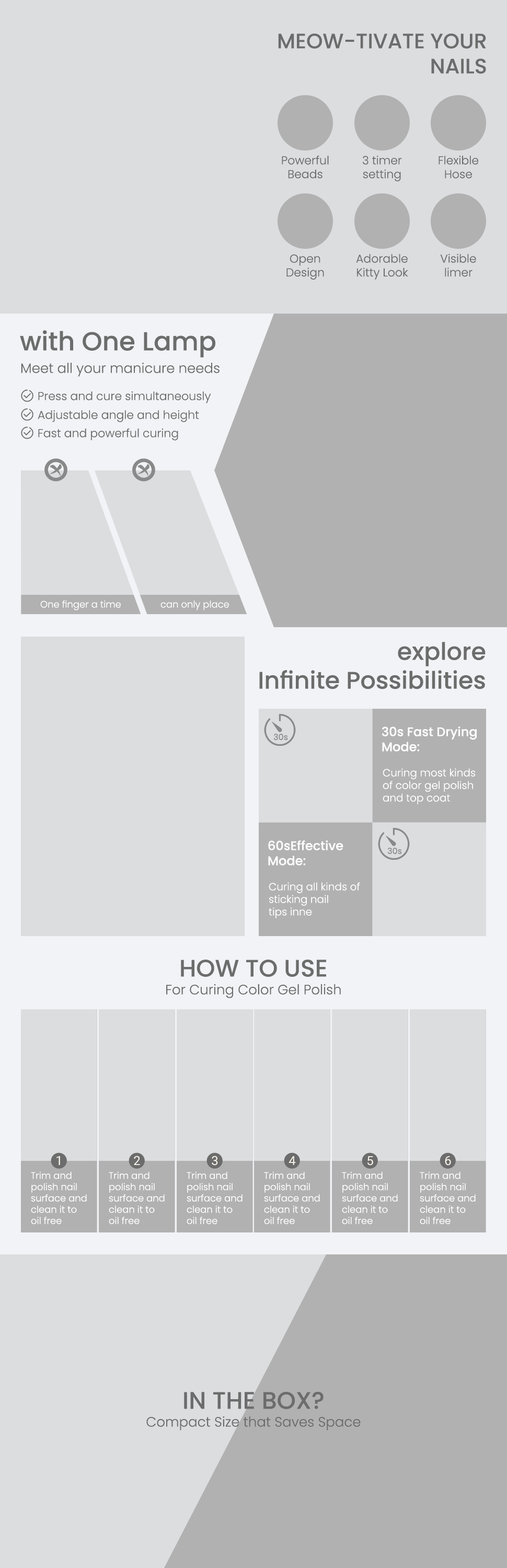
<style>
.page{position:relative;width:507px;height:1568px;background:#dcdddf}
.page>*{position:absolute;margin:0}
.t1{font:20.9px "Poppins-Medium";color:#6c6c6c;text-transform:uppercase}
.t2{font:11.5px "Poppins-Light";color:#6c6c6c}
.t3{font:26.1px "Poppins-Medium";color:#6c6c6c}
.t4{font:13.6px "Poppins-Light";color:#6c6c6c}
.t5{font:9.4px "Poppins-Light";color:#ffffff}
.t6{font:24px "Poppins-Medium";color:#6c6c6c}
.t7{font:8.4px "Poppins-Regular";color:#898989}
.t8{font:12.5px "Poppins-Medium";color:#ffffff}
.t9{font:10.5px "Poppins-Light";color:#ffffff}
.t10{font:24px "Poppins-Medium";color:#6c6c6c;text-transform:uppercase}
.t11{font:12.5px "Roboto-Regular";color:#faf5ec}
</style>
<div class="page">
<p class="t1" style="left:278px;top:33px;width:208px;height:41px;text-align:right">Meow-tivate Your<br>Nails</p>
<p class="t2" style="left:282px;top:155px;width:47px;height:24px;text-align:center">Powerful<br>Beads</p>
<p class="t2" style="left:363px;top:155px;width:39px;height:26px;text-align:center">3 timer<br>setting</p>
<p class="t2" style="left:439px;top:155px;width:39px;height:24px;text-align:center">Flexible<br>Hose</p>
<p class="t2" style="left:286px;top:254px;width:38px;height:26px;text-align:center">Open<br>Design</p>
<p class="t2" style="left:356px;top:254px;width:52px;height:26px;text-align:center">Adorable<br>Kitty Look</p>
<p class="t2" style="left:440px;top:253px;width:36px;height:24px;text-align:center">Visible<br>limer</p>
<p class="t3" style="left:20px;top:330px;width:195px;height:28px">with One Lamp</p>
<p class="t4" style="left:21px;top:362px;width:199px;height:15px">Meet all your manicure needs</p>
<p class="t2" style="left:38px;top:391px;width:173px;height:12px">Press and cure simultaneously</p>
<p class="t2" style="left:38px;top:410px;width:161px;height:12px">Adjustable angle and height</p>
<p class="t2" style="left:38px;top:428px;width:140px;height:13px">Fast and powerful curing</p>
<p class="t5" style="left:40px;top:600px;width:81px;height:10px">One finger a time</p>
<p class="t5" style="left:160px;top:601px;width:69px;height:9px">can only place</p>
<p class="t6" style="left:259px;top:642px;width:227px;height:47px;text-align:right">explore<br>Infinite Possibilities</p>
<p class="t7" style="left:273px;top:733px;width:15px;height:7px">30s</p>
<p class="t8" style="left:382px;top:727px;width:95px;height:25px">30s Fast Drying<br>Mode:</p>
<p class="t9" style="left:383px;top:768px;width:93px;height:36px">Curing most kinds<br>of color gel polish<br>and top coat</p>
<p class="t8" style="left:268px;top:840px;width:75px;height:26px">60sEffective<br>Mode:</p>
<p class="t7" style="left:387px;top:847px;width:15px;height:7px">30s</p>
<p class="t9" style="left:269px;top:882px;width:91px;height:36px">Curing all kinds of <br>sticking nail<br>tips inne</p>
<p class="t10" style="left:181px;top:960px;width:145px;height:17px">How to Use</p>
<p class="t4" style="left:166px;top:984px;width:175px;height:14px">For Curing Color Gel Polish</p>
<p class="t11" style="left:56px;top:1156px;width:4px;height:9px">1</p>
<p class="t11" style="left:134px;top:1156px;width:6px;height:9px">2</p>
<p class="t11" style="left:212px;top:1156px;width:6px;height:10px">3</p>
<p class="t11" style="left:289px;top:1156px;width:7px;height:9px">4</p>
<p class="t11" style="left:367px;top:1156px;width:6px;height:10px">5</p>
<p class="t11" style="left:445px;top:1156px;width:6px;height:10px">6</p>
<p class="t5" style="left:31px;top:1171px;width:56px;height:54px">Trim and<br>polish nail<br>surface and<br>clean it to<br>oil free</p>
<p class="t5" style="left:109px;top:1171px;width:56px;height:54px">Trim and<br>polish nail<br>surface and<br>clean it to<br>oil free</p>
<p class="t5" style="left:187px;top:1171px;width:56px;height:54px">Trim and<br>polish nail<br>surface and<br>clean it to<br>oil free</p>
<p class="t5" style="left:264px;top:1171px;width:56px;height:54px">Trim and<br>polish nail<br>surface and<br>clean it to<br>oil free</p>
<p class="t5" style="left:342px;top:1171px;width:56px;height:54px">Trim and<br>polish nail<br>surface and<br>clean it to<br>oil free</p>
<p class="t5" style="left:420px;top:1171px;width:56px;height:54px">Trim and<br>polish nail<br>surface and<br>clean it to<br>oil free</p>
<p class="t10" style="left:184px;top:1392px;width:140px;height:17px">in the Box?</p>
<p class="t4" style="left:146px;top:1416px;width:215px;height:15px">Compact Size that Saves Space</p>
</div>
